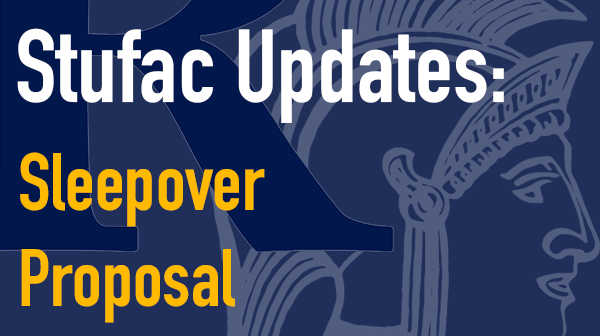
<style>
.page{position:relative;width:600px;height:336px;background:#202f5a}
.page>*{position:absolute;margin:0}
.t1{font:102px "DINCondensed-Bold";color:#ffffff}
.t2{font:80px "DINCondensed-Bold";color:#ffba00}
</style>
<div class="page">
<p class="t1" style="left:17px;top:28px;width:487px;height:95px">Stufac Updates:</p>
<p class="t2" style="left:20px;top:152px;width:245px;height:171px">Sleepover <br>Proposal</p>
</div>
